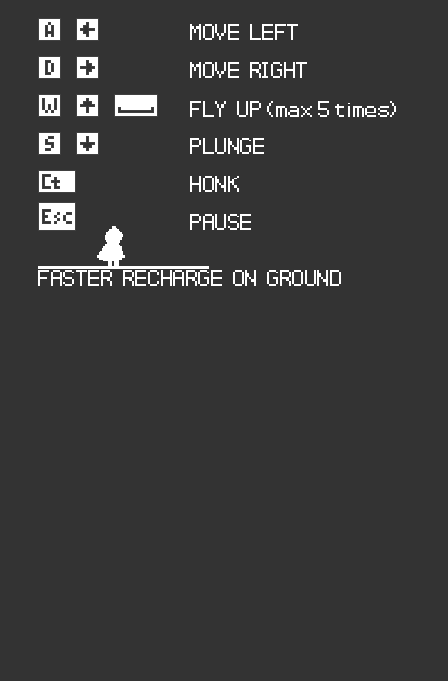
<style>
.page{position:relative;width:448px;height:681px;background:#333333}
.page>*{position:absolute;margin:0}
.t1{font:28.3px "Pokemon-Pixel-Font";color:#ffffff;scale:1.21 1}
.t2{font:28.9px "Pokemon-Pixel-Font";color:#ffffff;scale:1.19 1}
</style>
<div class="page">
<p class="t1" style="left:190px;top:24px;width:108px;height:16px">MOVE  LEFT</p>
<p class="t1" style="left:190px;top:62px;width:117px;height:16px">MOVE  RIGHT</p>
<p class="t2" style="left:190px;top:101px;width:206px;height:16px">FLY  UP (max 5 times)</p>
<p class="t2" style="left:190px;top:138px;width:74px;height:16px">PLUNGE</p>
<p class="t2" style="left:190px;top:176px;width:49px;height:16px">HONK</p>
<p class="t2" style="left:190px;top:214px;width:61px;height:16px">PAUSE</p>
<p class="t2" style="left:38px;top:270px;width:303px;height:16px">FASTER  RECHARGE  ON  GROUND</p>
</div>
